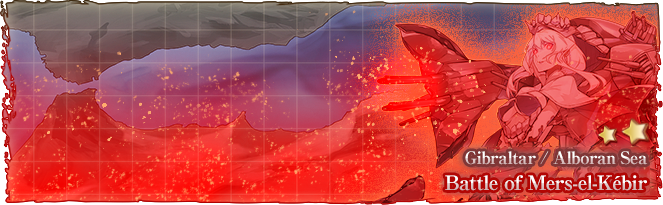
<style>
.page{position:relative;width:663px;height:205px}
.page>*{position:absolute;margin:0}
.t1{font:17px "RyuminPro-ExBold";letter-spacing:-0.04em}
.t2{font:20px "RyuminPro-ExBold";letter-spacing:-0.04em}
</style>
<div class="page">
<p class="t1" style="left:465px;top:151px;width:183px;height:14px">Gibraltar / Alboran Sea</p>
<p class="t2" style="left:445px;top:175px;width:202px;height:16px">Battle of Mers-el-Kébir</p>
</div>
